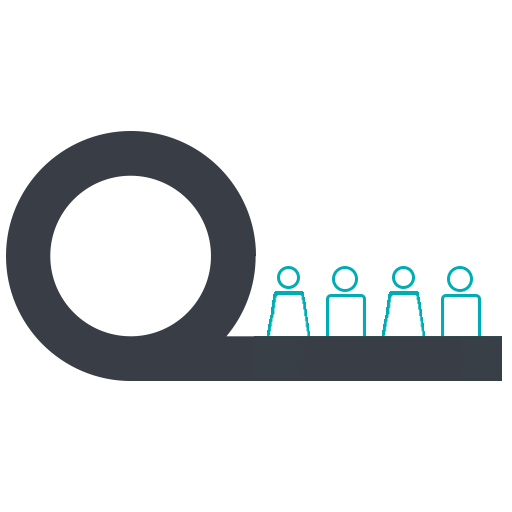
<style>
.page{position:relative;width:512px;height:512px;background:#ffffff}
.page>*{position:absolute;margin:0}
.t1{font:357.5px "AzonixRegular";color:#393e46}
</style>
<div class="page">
<p class="t1" style="left:6px;top:130px;width:250px;height:251px">Q</p>
</div>
